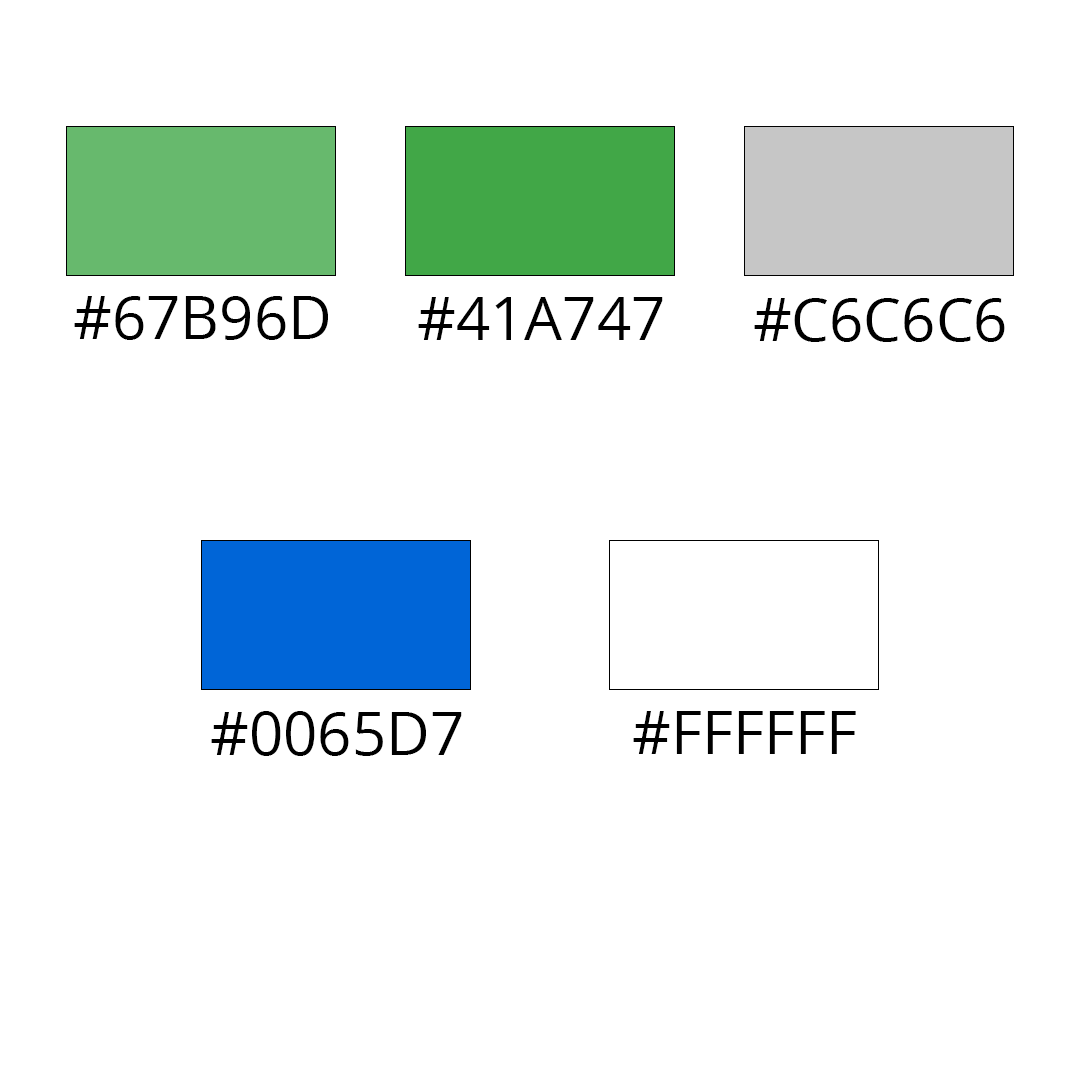
<style>
.page{position:relative;width:1080px;height:1080px;background:#ffffff}
.page>*{position:absolute;margin:0}
.t1{font:60px "OpenSans";color:#000000}
</style>
<div class="page">
<p class="t1" style="left:74px;top:296px;width:254px;height:44px">#67B96D</p>
<p class="t1" style="left:418px;top:297px;width:245px;height:43px">#41A747</p>
<p class="t1" style="left:754px;top:298px;width:251px;height:44px">#C6C6C6</p>
<p class="t1" style="left:211px;top:711px;width:251px;height:45px">#0065D7</p>
<p class="t1" style="left:633px;top:711px;width:223px;height:43px">#FFFFFF</p>
</div>
